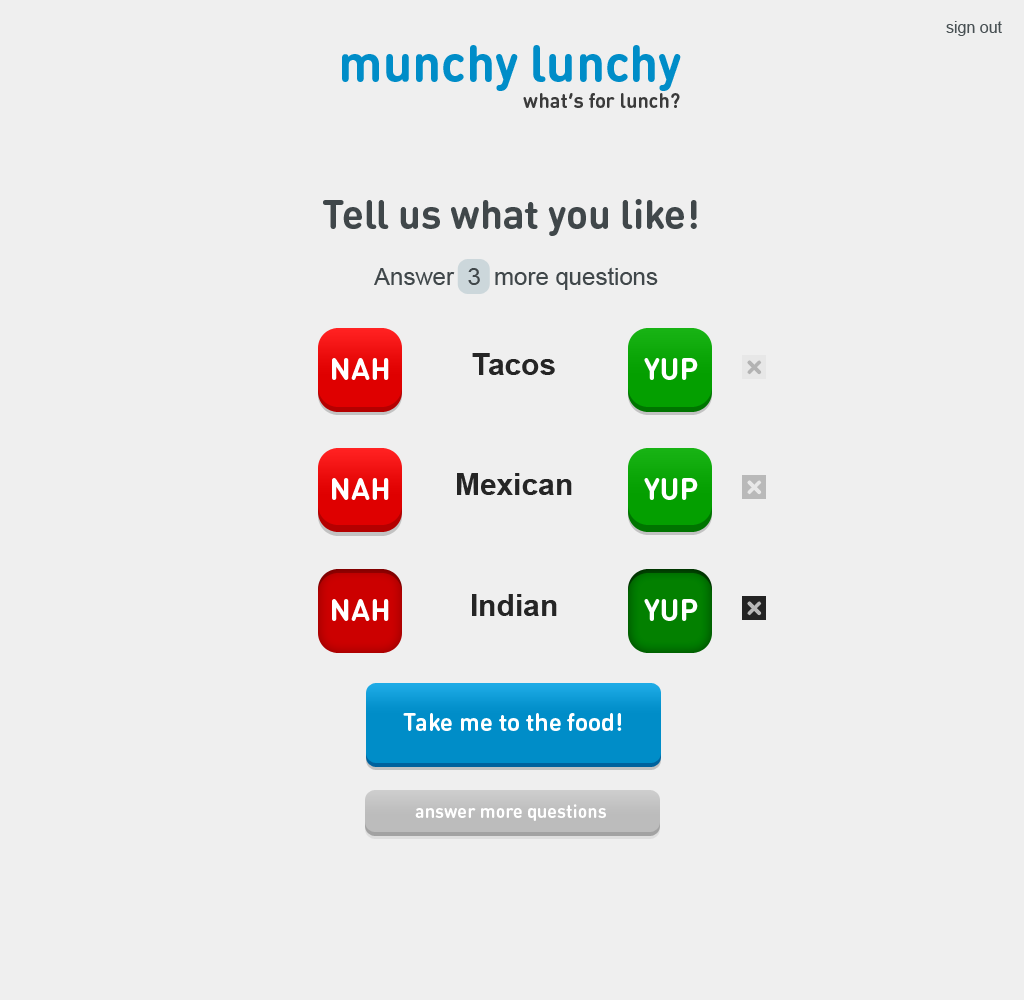
<style>
.page{position:relative;width:1024px;height:1000px;background:#efefef}
.page>*{position:absolute;margin:0}
.t1{font:16px "ArialMT";color:#485053}
.t2{font:51px "DINRoundOT-Bold";color:#008dc8}
.t3{font:20px "DINRoundOT-Bold";color:#3b3b3b}
.t4{font:40px "DINRoundOT-Bold";color:#40474a}
.t5{font:24px "ArialMT";color:#40474a}
.t6{font:30px "Arial-BoldMT";color:#252525}
.t7{font:30px "DINRoundOT-Bold";color:#ffffff}
.t8{font:24px "DINRoundOT-Bold";color:#ffffff}
.t9{font:18px "DINRoundOT-Bold";color:#ffffff}
</style>
<div class="page">
<p class="t1" style="left:946px;top:21px;width:56px;height:15px">sign out</p>
<p class="t2" style="left:342px;top:45px;width:339px;height:46px">munchy lunchy</p>
<p class="t3" style="left:523px;top:93px;width:157px;height:15px">what’s for lunch?</p>
<p class="t4" style="left:323px;top:199px;width:374px;height:37px">Tell us what you like!</p>
<p class="t5" style="left:374px;top:267px;width:284px;height:23px">Answer  3  more questions</p>
<p class="t6" style="left:472px;top:353px;width:83px;height:22px">Tacos</p>
<p class="t7" style="left:332px;top:358px;width:57px;height:22px">NAH</p>
<p class="t7" style="left:644px;top:358px;width:54px;height:22px">YUP</p>
<p class="t6" style="left:457px;top:473px;width:115px;height:22px">Mexican</p>
<p class="t7" style="left:332px;top:478px;width:57px;height:22px">NAH</p>
<p class="t7" style="left:644px;top:478px;width:54px;height:22px">YUP</p>
<p class="t7" style="left:332px;top:599px;width:57px;height:22px">NAH</p>
<p class="t6" style="left:472px;top:594px;width:85px;height:22px">Indian</p>
<p class="t7" style="left:644px;top:599px;width:54px;height:22px">YUP</p>
<p class="t8" style="left:403px;top:713px;width:219px;height:18px">Take me to the food!</p>
<p class="t9" style="left:415px;top:804px;width:191px;height:17px">answer more questions</p>
</div>
